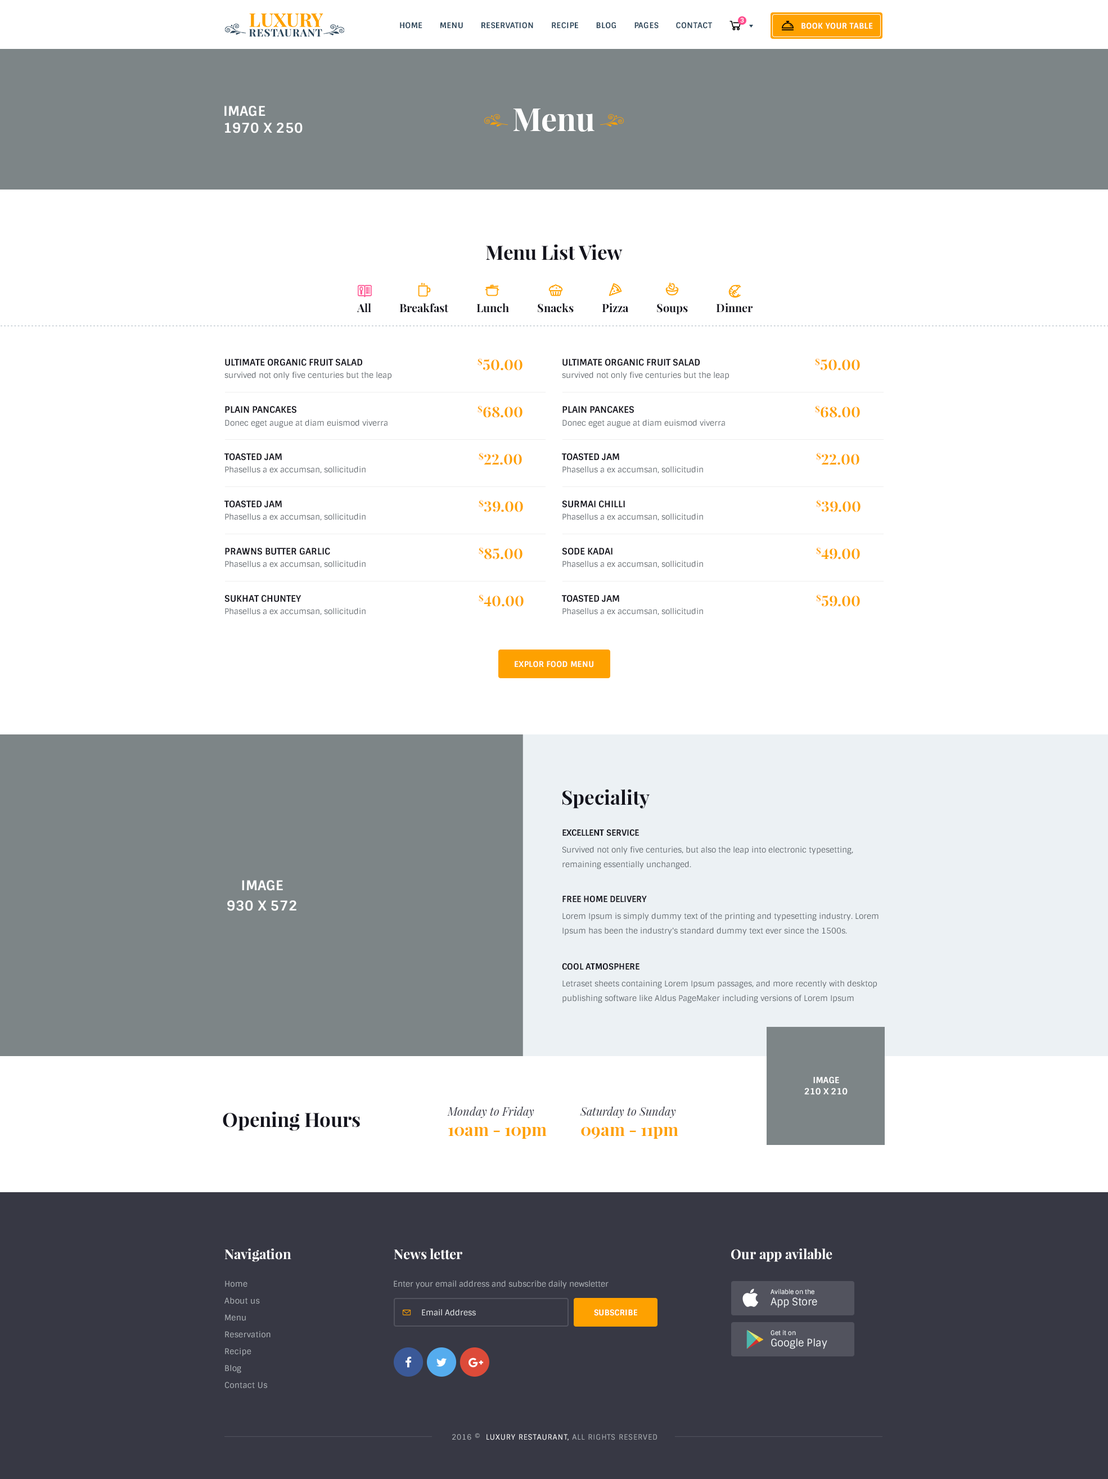
<style>
.page{position:relative;width:1108px;height:1479px;background:#ffffff}
.page>*{position:absolute;margin:0}
.t1{font:6.2px "Sintony-Bold";letter-spacing:0.025em;color:#ffffff;text-transform:uppercase}
.t2{font:7.9px "Sintony-Bold";letter-spacing:0.025em;color:#2c465a;text-transform:uppercase}
.t3{font:7.9px "Sintony-Bold";letter-spacing:0.025em;color:#ffffff;text-transform:uppercase}
.t4{font:13.5px/16.9px "Sintony-Bold";letter-spacing:0.005em;color:#ffffff;text-transform:uppercase}
.t5{font:31.5px "PlayfairDisplay-Bold";color:#ffffff}
.t6{font:19.7px "PlayfairDisplay-Bold";color:#14141d}
.t7{font:11.2px "PlayfairDisplay-Bold";color:#14141d}
.t8{font:9px "Sintony-Bold";color:#14141d;text-transform:uppercase}
.t9{font:14.6px "PlayfairDisplay-Bold";color:#fea100;text-transform:uppercase}
.t10{font:7.9px "Sintony";color:#5c6369}
.t11{font:8.4px "Sintony-Bold";color:#14141d;text-transform:uppercase}
.t12{font:7.9px/14.6px "Sintony";color:#5c6369}
.t13{font:13.5px/20.2px "Sintony-Bold";letter-spacing:0.005em;color:#ffffff;text-transform:uppercase}
.t14{font:8.4px/11.2px "Sintony-Bold";letter-spacing:0.005em;color:#ffffff;text-transform:uppercase}
.t15{font:11.2px "PlayfairDisplay-Italic";color:#373844}
.t16{font:16.9px "PlayfairDisplay-Bold";color:#fea100}
.t17{font:13.5px "PlayfairDisplay-Bold";color:#ffffff}
.t18{font:7.9px/16.9px "Sintony";letter-spacing:0.025em;color:#adb2b7}
.t19{font:7.9px "Sintony";color:#adb2b7}
.t20{font:6.2px/11.2px "Sintony";color:#edf1f3}
.t21{font:10.1px/11.2px "Sintony";color:#edf1f3}
.t22{font:7.9px "Sintony";color:#e6e9eb}
.t23{font:7.3px "Sintony";letter-spacing:0.075em;color:#adb2b7;text-transform:uppercase}
.t24{font:7.3px "Sintony";letter-spacing:0.075em;color:#ffffff;text-transform:uppercase}
</style>
<div class="page">
<p class="t1" style="left:740px;top:17px;width:4px;height:6px">3</p>
<p class="t2" style="left:400px;top:22px;width:312px;height:7px">Home       menu       reservation       recipe       blog       Pages       contact</p>
<p class="t3" style="left:802px;top:22px;width:71px;height:7px">Book your table</p>
<p class="t4" style="left:224px;top:106px;width:79px;height:27px">Image<br>1970 x 250</p>
<p class="t5" style="left:513px;top:109px;width:82px;height:23px">Menu</p>
<p class="t6" style="left:486px;top:244px;width:137px;height:16px">Menu List View</p>
<p class="t7" style="left:357px;top:303px;width:396px;height:11px">All          Breakfast          Lunch          Snacks          Pizza          Soups          Dinner</p>
<p class="t8" style="left:225px;top:359px;width:137px;height:7px">Ultimate organic fruit salad</p>
<p class="t9" style="left:478px;top:358px;width:45px;height:13px">$50.00</p>
<p class="t8" style="left:562px;top:359px;width:138px;height:7px">Ultimate organic fruit salad</p>
<p class="t9" style="left:815px;top:358px;width:45px;height:13px">$50.00</p>
<p class="t10" style="left:224px;top:372px;width:168px;height:8px">survived not only five centuries but the leap</p>
<p class="t10" style="left:562px;top:372px;width:167px;height:8px">survived not only five centuries but the leap</p>
<p class="t8" style="left:225px;top:406px;width:71px;height:7px">Plain pancakes</p>
<p class="t9" style="left:478px;top:405px;width:45px;height:13px">$68.00</p>
<p class="t8" style="left:562px;top:406px;width:72px;height:7px">Plain pancakes</p>
<p class="t9" style="left:815px;top:405px;width:45px;height:13px">$68.00</p>
<p class="t10" style="left:225px;top:420px;width:163px;height:8px">Donec eget augue at diam euismod viverra</p>
<p class="t10" style="left:562px;top:420px;width:163px;height:8px">Donec eget augue at diam euismod viverra</p>
<p class="t8" style="left:224px;top:453px;width:58px;height:8px">Toasted jam</p>
<p class="t9" style="left:479px;top:452px;width:43px;height:13px">$22.00</p>
<p class="t8" style="left:562px;top:453px;width:57px;height:8px">Toasted jam</p>
<p class="t9" style="left:816px;top:452px;width:44px;height:13px">$22.00</p>
<p class="t10" style="left:225px;top:466px;width:141px;height:8px">Phasellus a ex accumsan, sollicitudin</p>
<p class="t10" style="left:562px;top:466px;width:141px;height:8px">Phasellus a ex accumsan, sollicitudin</p>
<p class="t8" style="left:224px;top:501px;width:58px;height:7px">Toasted jam</p>
<p class="t9" style="left:479px;top:500px;width:44px;height:12px">$39.00</p>
<p class="t8" style="left:562px;top:501px;width:63px;height:7px">Surmai chilli</p>
<p class="t9" style="left:816px;top:500px;width:45px;height:12px">$39.00</p>
<p class="t10" style="left:225px;top:514px;width:141px;height:7px">Phasellus a ex accumsan, sollicitudin</p>
<p class="t10" style="left:562px;top:514px;width:141px;height:7px">Phasellus a ex accumsan, sollicitudin</p>
<p class="t8" style="left:225px;top:548px;width:105px;height:7px">Prawns butter garlic</p>
<p class="t9" style="left:479px;top:547px;width:44px;height:13px">$85.00</p>
<p class="t8" style="left:562px;top:548px;width:51px;height:7px">Sode kadai</p>
<p class="t9" style="left:816px;top:547px;width:44px;height:13px">$49.00</p>
<p class="t10" style="left:225px;top:561px;width:141px;height:7px">Phasellus a ex accumsan, sollicitudin</p>
<p class="t10" style="left:562px;top:561px;width:141px;height:7px">Phasellus a ex accumsan, sollicitudin</p>
<p class="t8" style="left:224px;top:595px;width:78px;height:7px">Sukhat chuntey</p>
<p class="t9" style="left:479px;top:594px;width:45px;height:13px">$40.00</p>
<p class="t8" style="left:562px;top:595px;width:57px;height:7px">Toasted jam</p>
<p class="t9" style="left:816px;top:594px;width:44px;height:13px">$59.00</p>
<p class="t10" style="left:225px;top:608px;width:141px;height:7px">Phasellus a ex accumsan, sollicitudin</p>
<p class="t10" style="left:562px;top:608px;width:141px;height:7px">Phasellus a ex accumsan, sollicitudin</p>
<p class="t3" style="left:515px;top:661px;width:78px;height:7px">Explor food menu</p>
<p class="t6" style="left:562px;top:789px;width:88px;height:20px">Speciality</p>
<p class="t11" style="left:562px;top:829px;width:78px;height:7px">EXCELLENT SERVICE</p>
<p class="t12" style="left:562px;top:847px;width:291px;height:23px">Survived not only five centuries, but also the leap into electronic typesetting, remaining essentially unchanged.</p>
<p class="t13" style="left:227px;top:880px;width:69px;height:31px;text-align:center">Image<br>930 x 572</p>
<p class="t11" style="left:562px;top:896px;width:85px;height:7px">FREE Home DELIVERY</p>
<p class="t12" style="left:562px;top:913px;width:317px;height:23px">Lorem Ipsum is simply dummy text of the printing and typesetting industry. Lorem Ipsum has been the industry's standard dummy text ever since the 1500s.</p>
<p class="t11" style="left:562px;top:963px;width:78px;height:7px">Cool atmosphere</p>
<p class="t12" style="left:562px;top:980px;width:315px;height:24px">Letraset sheets containing Lorem Ipsum passages, and more recently with desktop publishing software like Aldus PageMaker including versions of Lorem Ipsum</p>
<p class="t14" style="left:804px;top:1077px;width:44px;height:18px;text-align:center">Image<br>210 x 210</p>
<p class="t15" style="left:447px;top:1106px;width:100px;height:33px">Monday to Friday<br><span class="t16">10am - 10pm</span></p>
<p class="t15" style="left:580px;top:1106px;width:98px;height:33px">Saturday to Sunday<br><span class="t16">09am - 11pm</span></p>
<p class="t6" style="left:223px;top:1112px;width:137px;height:19px">Opening Hours</p>
<p class="t17" style="left:224px;top:1249px;width:67px;height:13px">Navigation</p>
<p class="t17" style="left:394px;top:1249px;width:68px;height:11px">News letter</p>
<p class="t17" style="left:731px;top:1249px;width:101px;height:13px">Our app avilable</p>
<p class="t18" style="left:224px;top:1281px;width:47px;height:108px">Home<br>About us<br>Menu<br>Reservation<br>Recipe<br>Blog<br>Contact Us</p>
<p class="t19" style="left:394px;top:1281px;width:215px;height:8px">Enter your email address and subscribe daily newsletter</p>
<p class="t20" style="left:771px;top:1289px;width:46px;height:19px">Avilable on the<br><span class="t21">App Store</span></p>
<p class="t22" style="left:422px;top:1310px;width:54px;height:6px">Email Address</p>
<p class="t3" style="left:594px;top:1310px;width:43px;height:6px">Subscribe</p>
<p class="t21" style="left:771px;top:1330px;width:56px;height:19px"><span class="t20">Get it on<br></span>Google Play</p>
<p class="t23" style="left:452px;top:1433px;width:205px;height:8px">2016 ©  <span class="t24">Luxury RestaurAnt,</span> All rights reserved</p>
</div>
